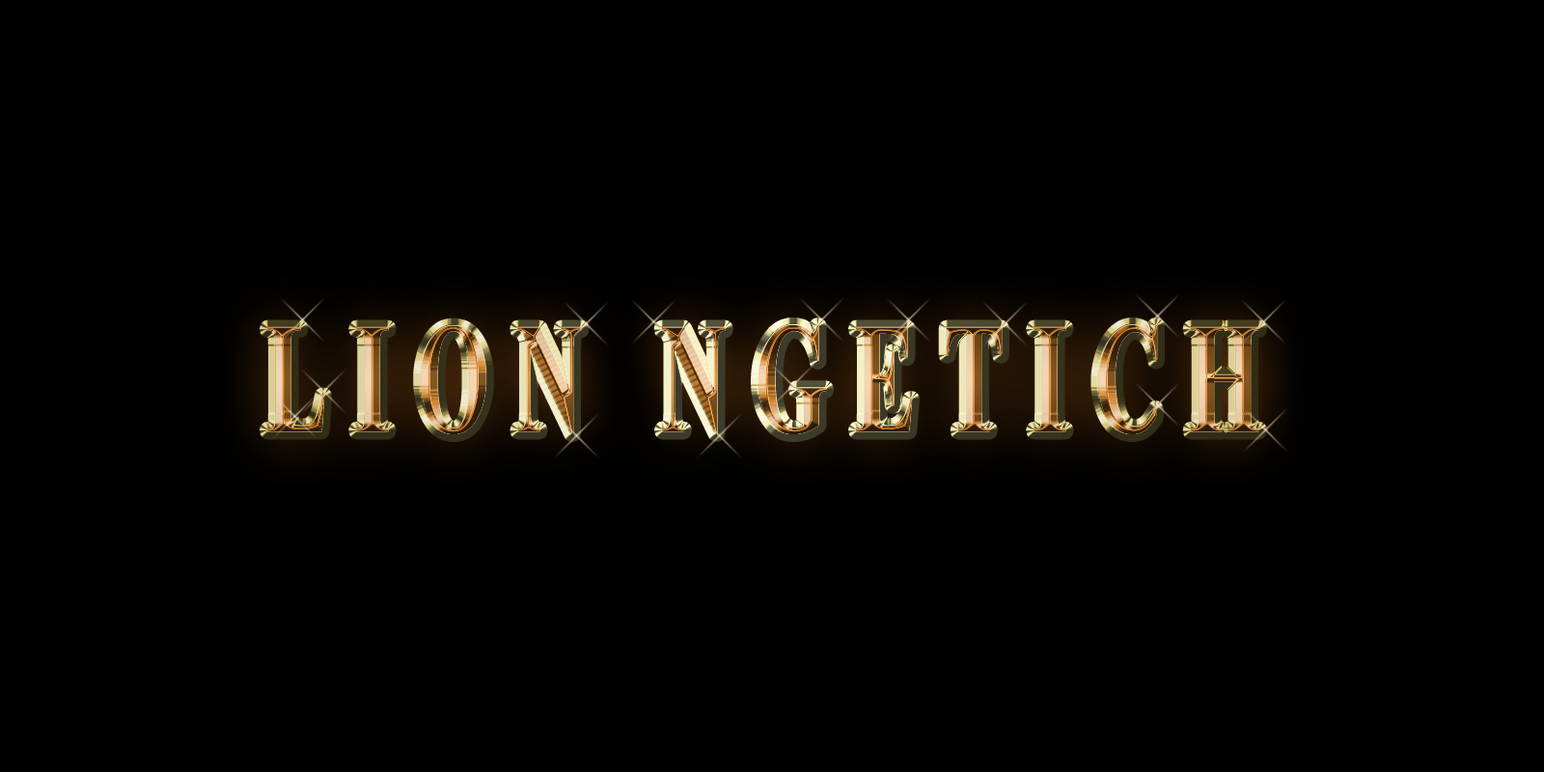
<style>
.page{position:relative;width:1544px;height:772px;background:#000000}
.page>*{position:absolute;margin:0}
.t1{font:157.4px "TimesNewRomanPS-BoldMT";letter-spacing:0.29em;scale:0.59 1}
</style>
<div class="page">
<p class="t1" style="left:267px;top:325px;width:993px;height:109px">LION NGETICH</p>
<p class="t1" style="left:267px;top:325px;width:993px;height:109px">LION NGETICH</p>
</div>
